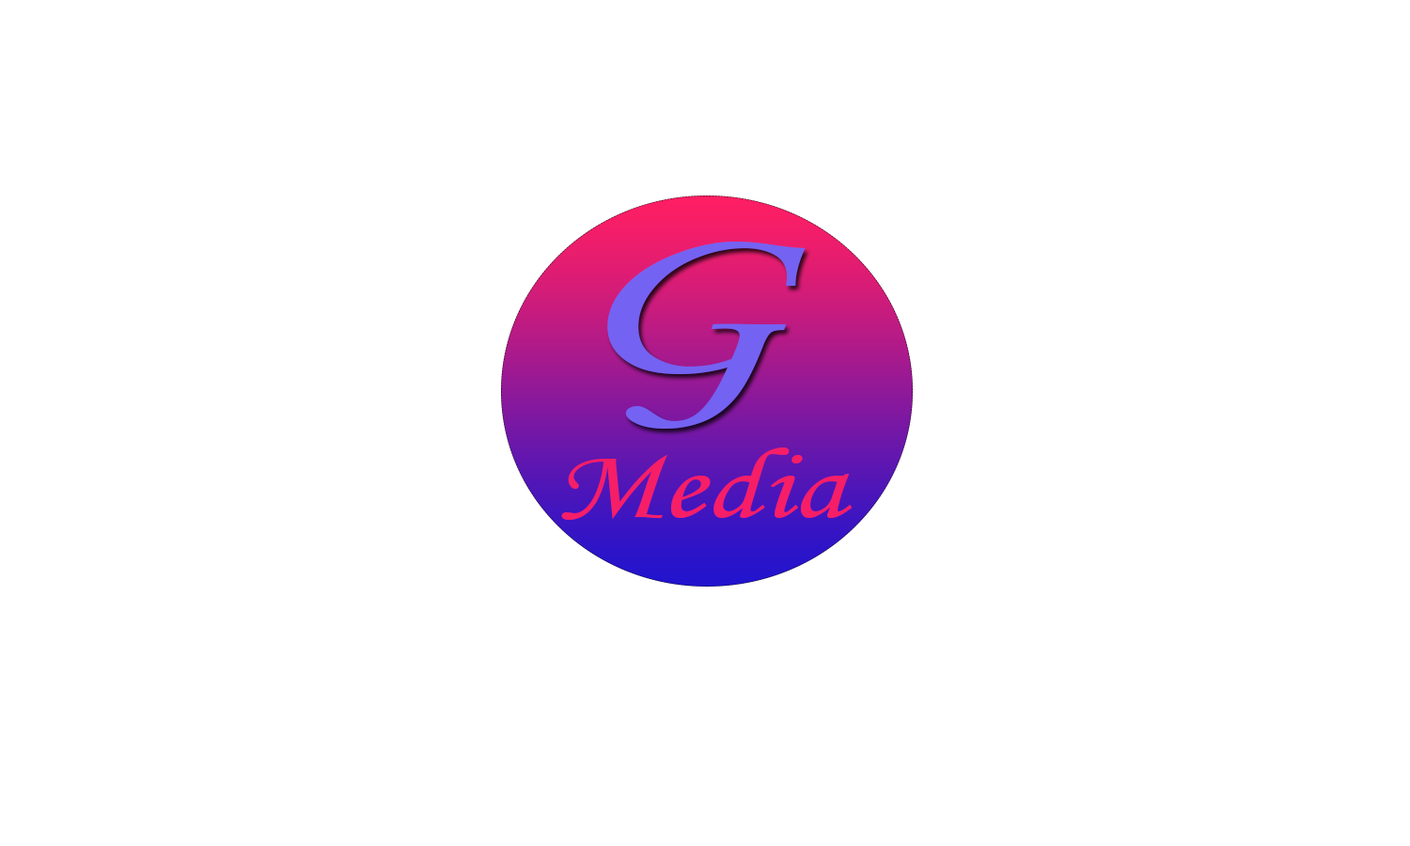
<style>
.page{position:relative;width:1410px;height:846px;background:#ffffff}
.page>*{position:absolute;margin:0}
.t1{font:221.5px "MonotypeCorsiva";color:#7462f3;scale:1.62 1}
.t2{font:100.9px "MonotypeCorsiva";color:#f61e67;scale:1.27 1}
</style>
<div class="page">
<p class="t1" style="left:607px;top:241px;width:198px;height:188px">G</p>
<p class="t2" style="left:561px;top:447px;width:291px;height:73px">Media</p>
</div>
